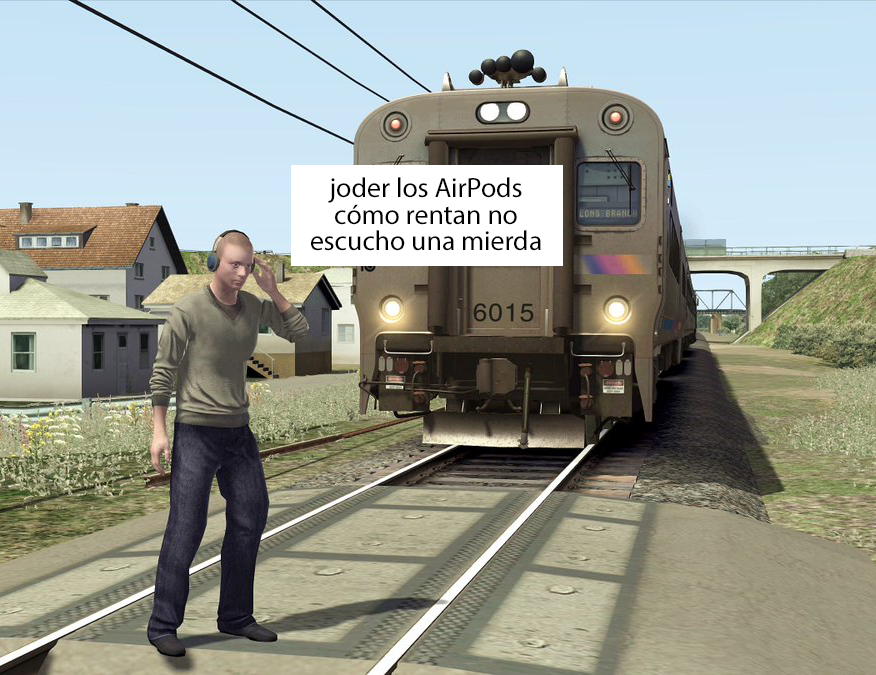
<style>
.page{position:relative;width:876px;height:675px}
.page>*{position:absolute;margin:0}
.t1{font:27.7px "MyriadPro-Regular";color:#000000}
</style>
<div class="page">
<p class="t1" style="left:311px;top:177px;width:230px;height:74px;text-align:center">joder los AirPods<br>cómo rentan no<br>escucho una mierda</p>
</div>
